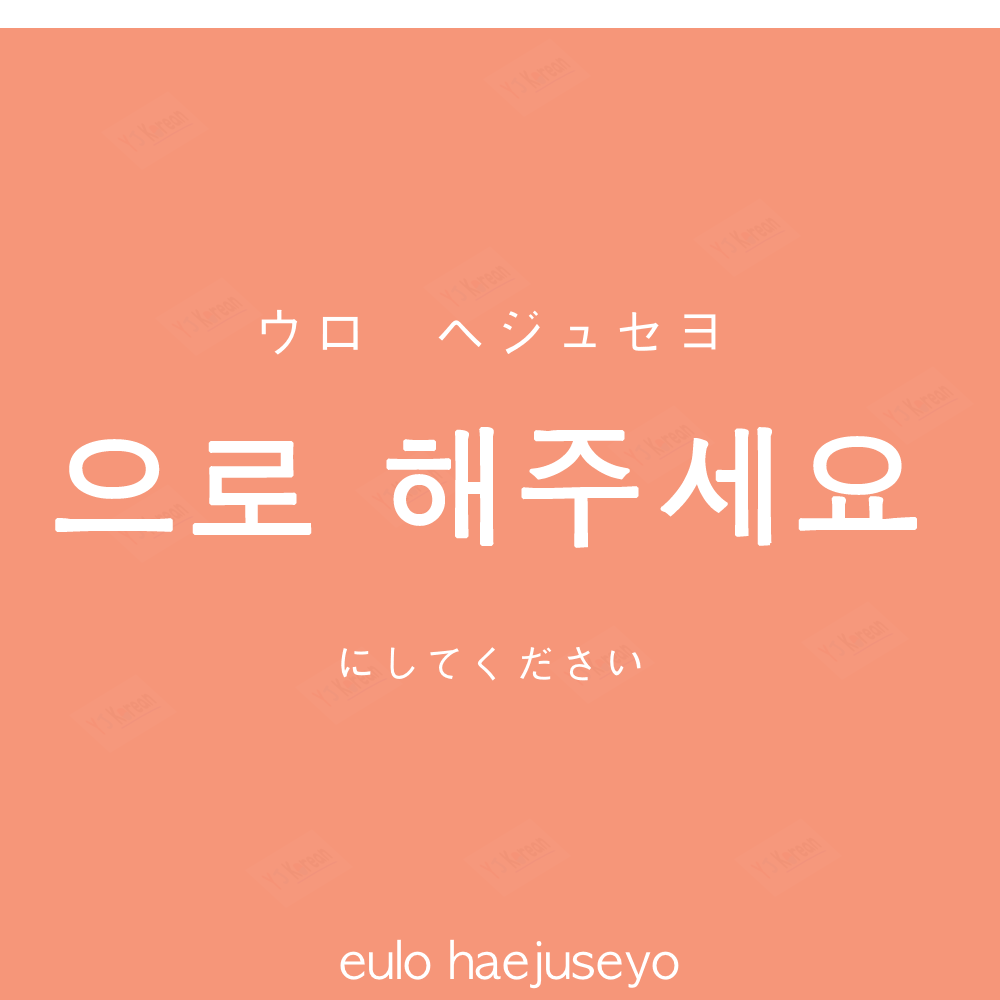
<style>
.page{position:relative;width:1000px;height:1000px;background:#f69679}
.page>*{position:absolute;margin:0}
.t1{font:60px "AppleGothic";color:#ffffff}
.t2{font:130px "AppleGothic";letter-spacing:0.04em;color:#ffffff;font-weight:bold}
.t3{font:45px "AppleGothic";color:#ffffff}
.t4{font:50px "AppleGothic";color:#ffffff}
</style>
<div class="page">
<p class="t1" style="left:261px;top:309px;width:455px;height:46px">ウロ　ヘジュセヨ</p>
<p class="t2" style="left:55px;top:427px;width:862px;height:121px">으로 해주세요</p>
<p class="t3" style="left:341px;top:647px;width:300px;height:34px">にしてください</p>
<p class="t4" style="left:340px;top:939px;width:339px;height:50px">eulo haejuseyo</p>
</div>
